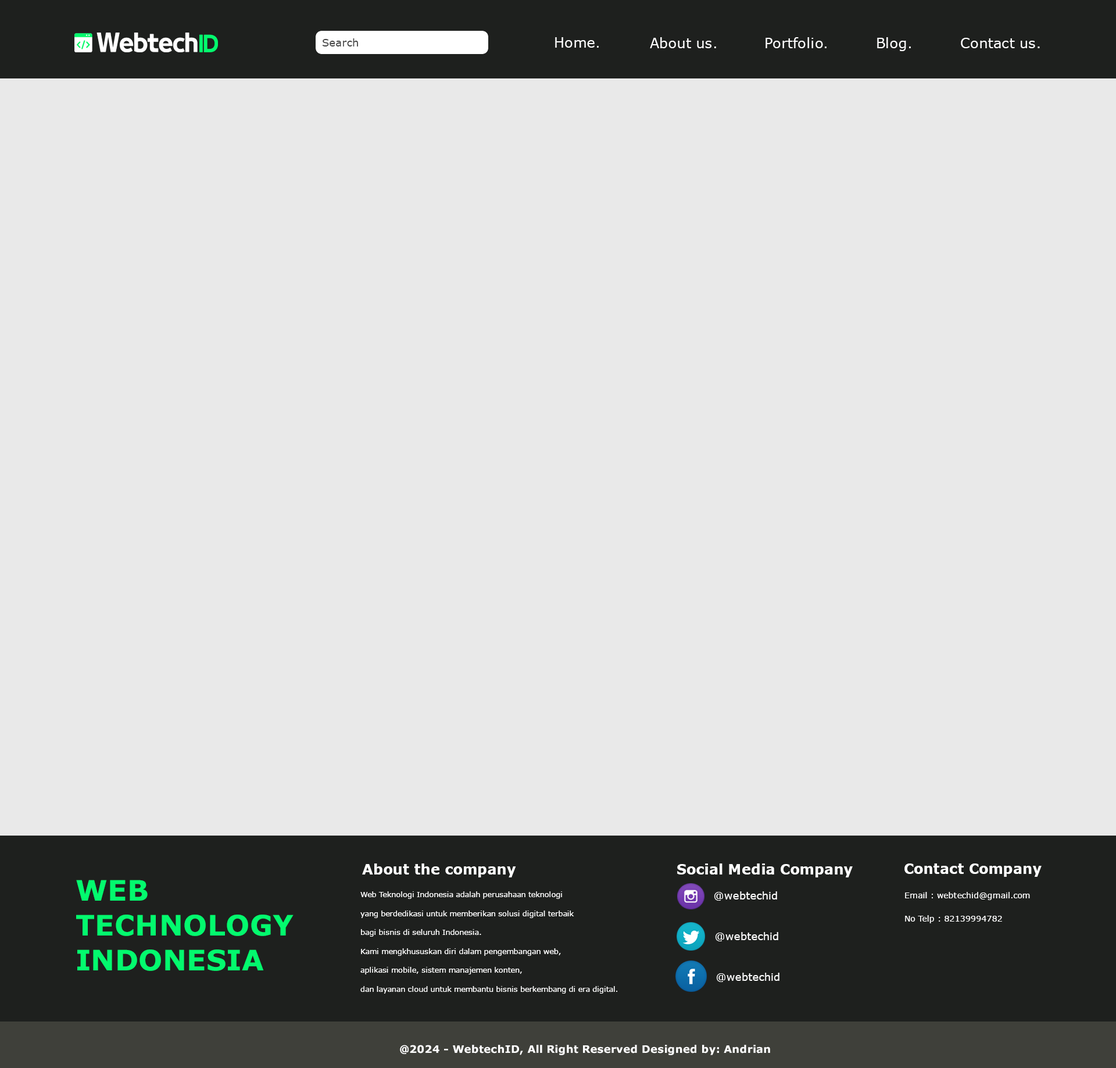
<style>
.page{position:relative;width:1116px;height:1068px;background:#e9e9e9}
.page>*{position:absolute;margin:0}
.t1{font:10.5px "Verdana";letter-spacing:0.01em;color:#464646}
.t2{font:14px "Verdana";letter-spacing:0.01em;color:#ffffff}
.t3{font:14px "Verdana-Bold";letter-spacing:0.01em;color:#ffffff}
.t4{font:28.2px/34.9px "Verdana-Bold";letter-spacing:0.01em;color:#03fa6e}
.t5{font:7.6px/18.9px "Verdana";letter-spacing:0.01em;color:#ffffff;scale:0.96 1}
.t6{font:10.5px "Verdana";letter-spacing:0.01em;color:#ffffff}
.t7{font:8.1px "Verdana";letter-spacing:0.01em;color:#ffffff}
.t8{font:10.5px "Verdana-Bold";letter-spacing:0.01em;color:#ffffff}
</style>
<div class="page">
<p class="t1" style="left:323px;top:38px;width:35px;height:9px">Search</p>
<p class="t2" style="left:555px;top:37px;width:44px;height:11px">Home.</p>
<p class="t2" style="left:650px;top:37px;width:66px;height:11px">About us.</p>
<p class="t2" style="left:766px;top:37px;width:61px;height:11px">Portfolio.</p>
<p class="t2" style="left:877px;top:37px;width:34px;height:14px">Blog.</p>
<p class="t2" style="left:961px;top:38px;width:79px;height:10px">Contact us.</p>
<p class="t3" style="left:362px;top:864px;width:154px;height:14px">About the company</p>
<p class="t3" style="left:677px;top:864px;width:176px;height:14px">Social Media Company</p>
<p class="t3" style="left:904px;top:864px;width:138px;height:13px">Contact Company</p>
<p class="t4" style="left:76px;top:880px;width:218px;height:91px">WEB <br>TECHNOLOGY <br>INDONESIA</p>
<p class="t5" style="left:360px;top:892px;width:257px;height:102px">Web Teknologi Indonesia adalah perusahaan teknologi<br>yang berdedikasi untuk memberikan solusi digital terbaik <br>bagi bisnis di seluruh Indonesia. <br>Kami mengkhususkan diri dalam pengembangan web, <br>aplikasi mobile, sistem manajemen konten, <br>dan layanan cloud untuk membantu bisnis berkembang di era digital.</p>
<p class="t6" style="left:714px;top:892px;width:63px;height:9px">@webtechid</p>
<p class="t7" style="left:905px;top:892px;width:125px;height:8px">Email : webtechid@gmail.com</p>
<p class="t7" style="left:905px;top:916px;width:97px;height:8px">No Telp : 82139994782</p>
<p class="t6" style="left:715px;top:932px;width:63px;height:10px">@webtechid</p>
<p class="t6" style="left:716px;top:973px;width:64px;height:9px">@webtechid</p>
<p class="t8" style="left:400px;top:1045px;width:370px;height:11px">@2024 - WebtechID, All Right Reserved Designed by: Andrian</p>
</div>
